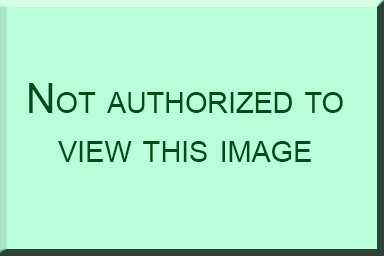
<style>
.page{position:relative;width:384px;height:256px;background:#b9ffda}
.page>*{position:absolute;margin:0}
.t1{font:41px "ArialMT";color:#014c16;font-variant:small-caps}
</style>
<div class="page">
<p class="t1" style="left:29px;top:83px;width:314px;height:79px;text-align:center">Not authorized to<br>view this image</p>
</div>
